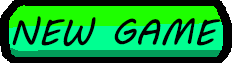
<style>
.page{position:relative;width:232px;height:63px;background:#000000}
.page>*{position:absolute;margin:0}
.t1{font:36px "MVBoli";color:#000000}
</style>
<div class="page">
<p class="t1" style="left:12px;top:16px;width:209px;height:31px">NEW GAME</p>
</div>
